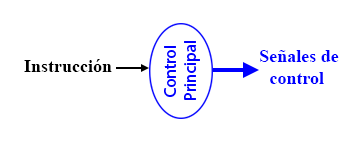
<style>
.page{position:relative;width:356px;height:142px;background:#ffffff}
.page>*{position:absolute;margin:0}
.t1{font:18px "TimesNewRomanPS-BoldMT";color:#0000ff}
.t2{font:18px "TimesNewRomanPS-BoldMT";color:#000000}
</style>
<div class="page">
<p class="t1" style="left:260px;top:50px;width:79px;height:34px;text-align:center">Señales de <br>control</p>
<p class="t2" style="left:24px;top:59px;width:88px;height:13px">Instrucción</p>
</div>
